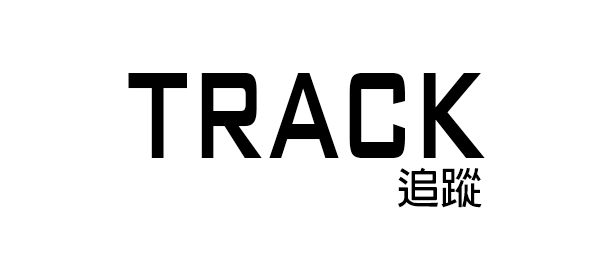
<style>
.page{position:relative;width:600px;height:266px;background:#ffffff}
.page>*{position:absolute;margin:0}
.t1{font:200px "BankGothicBT-Medium";color:#000000;scale:0.57 1}
.t2{font:42.9px "AdobeFanHeitiStd-Bold";color:#000000}
</style>
<div class="page">
<p class="t1" style="left:128px;top:73px;width:357px;height:85px">track</p>
<p class="t2" style="left:398px;top:167px;width:84px;height:41px">追蹤</p>
</div>
